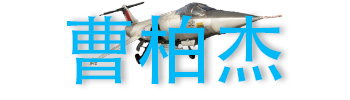
<style>
.page{position:relative;width:350px;height:100px;background:#ffffff}
.page>*{position:absolute;margin:0}
.t1{font:75px "AdobeHeitiStd-Regular";color:#01b9f6}
</style>
<div class="page">
<p class="t1" style="left:67px;top:15px;width:216px;height:70px">曹柏杰</p>
</div>
